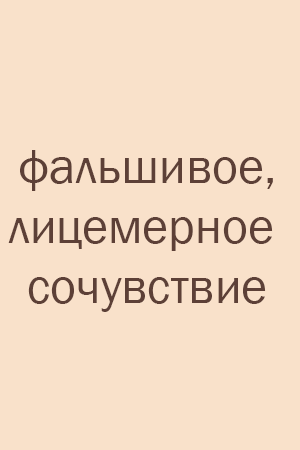
<style>
.page{position:relative;width:300px;height:450px;background:#f9e1ca}
.page>*{position:absolute;margin:0}
.t1{font:50px "FranklinGothic-Book";color:#5d4037}
</style>
<div class="page">
<p class="t1" style="left:8px;top:150px;width:265px;height:162px;text-align:center">фальшивое,<br>лицемерное <br>сочувствие</p>
</div>
